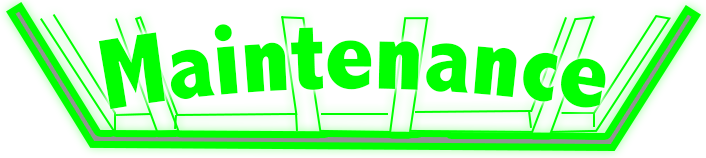
<style>
.page{position:relative;width:706px;height:158px;background:#ffffff}
.page>*{position:absolute;margin:0}
.t1{font:100.8px "AbadiMT-CondensedExtraBold";color:#00ff00}
</style>
<div class="page">
<p class="t1" style="left:98px;top:24px;width:508px;height:86px">Maintenance</p>
</div>
